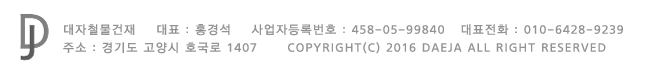
<style>
.page{position:relative;width:651px;height:79px;background:#ffffff}
.page>*{position:absolute;margin:0}
.t1{font:12px/18px "THELuxGoM";letter-spacing:0.1em;color:#939393}
</style>
<div class="page">
<p class="t1" style="left:63px;top:24px;width:560px;height:30px">대자철물건재    대표 : 홍경석    사업자등록번호 : 458-05-99840   대표전화 : 010-6428-9239<br>주소 : 경기도 고양시 호국로 1407      COPYRIGHT(C) 2016 DAEJA ALL RIGHT RESERVED</p>
</div>
